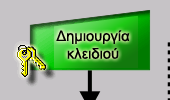
<style>
.page{position:relative;width:170px;height:100px;background:#c6c3c6}
.page>*{position:absolute;margin:0}
.t1{font:14.7px "ArialMT";color:#000000}
</style>
<div class="page">
<p class="t1" style="left:56px;top:30px;width:74px;height:29px;text-align:center">Δημιουργία<br>κλειδιού</p>
</div>
